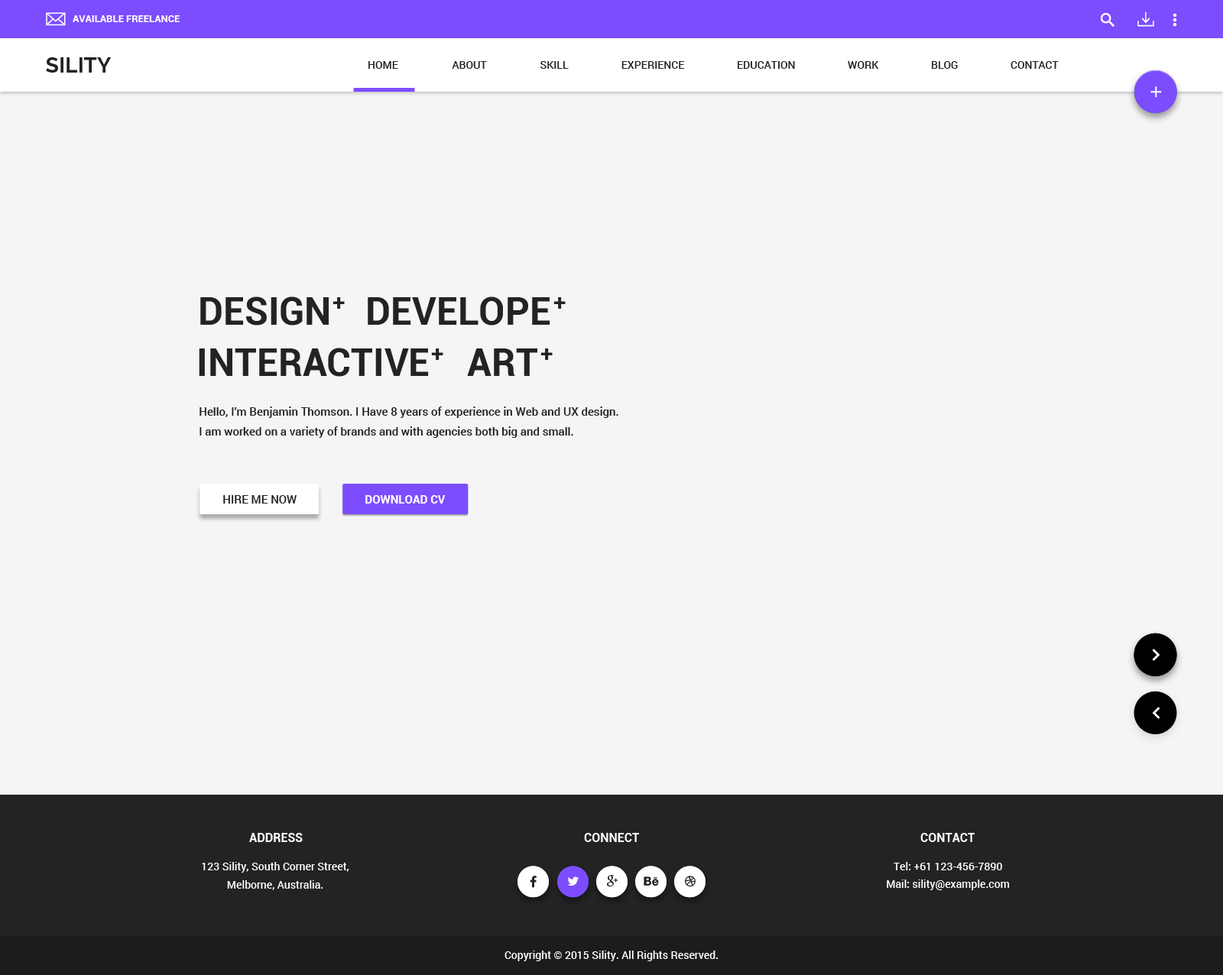
<style>
.page{position:relative;width:1223px;height:975px;background:#f5f5f5}
.page>*{position:absolute;margin:0}
.t1{font:9.9px "Roboto-Bold";color:#ffffff;text-transform:uppercase}
.t2{font:21.4px "Raleway-Bold";color:#232323}
.t3{font:10.7px "Roboto-Medium";color:#232323;text-transform:uppercase}
.t4{font:38.2px "Roboto-Bold";color:#232323;text-transform:uppercase}
.t5{font:22.9px "Roboto-Bold";color:#232323;text-transform:uppercase}
.t6{font:11.5px/19.9px "Roboto-Medium";color:#232323}
.t7{font:11.5px "Roboto-Medium";color:#232323}
.t8{font:11.5px "Roboto-Bold";color:#ffffff}
.t9{font:12.2px "Roboto-Bold";color:#ffffff;text-transform:uppercase}
.t10{font:10.7px/18.3px "Roboto-Medium";color:#ffffff}
.t11{font:10.7px "Roboto-Medium";color:#ffffff}
</style>
<div class="page">
<p class="t1" style="left:73px;top:15px;width:107px;height:7px">available freelance</p>
<p class="t2" style="left:46px;top:57px;width:66px;height:16px">SILITY</p>
<p class="t3" style="left:368px;top:61px;width:30px;height:8px">home</p>
<p class="t3" style="left:452px;top:61px;width:35px;height:8px">about</p>
<p class="t3" style="left:540px;top:61px;width:29px;height:8px">skill</p>
<p class="t3" style="left:621px;top:61px;width:64px;height:8px">experience</p>
<p class="t3" style="left:737px;top:61px;width:58px;height:8px">education</p>
<p class="t3" style="left:848px;top:61px;width:31px;height:8px">work</p>
<p class="t3" style="left:932px;top:61px;width:26px;height:8px">blog</p>
<p class="t3" style="left:1010px;top:61px;width:48px;height:8px">Contact</p>
<p class="t4" style="left:200px;top:297px;width:129px;height:29px">design</p>
<p class="t5" style="left:332px;top:297px;width:13px;height:12px">+</p>
<p class="t4" style="left:368px;top:297px;width:182px;height:29px">developE</p>
<p class="t5" style="left:553px;top:297px;width:13px;height:12px">+</p>
<p class="t4" style="left:199px;top:348px;width:230px;height:29px">interactive</p>
<p class="t5" style="left:431px;top:348px;width:12px;height:12px">+</p>
<p class="t4" style="left:467px;top:348px;width:70px;height:28px">ART</p>
<p class="t5" style="left:540px;top:348px;width:13px;height:12px">+</p>
<p class="t6" style="left:199px;top:407px;width:419px;height:31px">Hello, I’m Benjamin Thomson. I Have 8 years of experience in Web and UX design.<br>I am worked on a variety of brands and with agencies both big and small.</p>
<p class="t7" style="left:223px;top:495px;width:74px;height:9px">HIRE ME NOW</p>
<p class="t8" style="left:365px;top:495px;width:81px;height:9px">DOWNLOAD CV</p>
<p class="t9" style="left:249px;top:833px;width:54px;height:9px">Address</p>
<p class="t9" style="left:584px;top:833px;width:55px;height:9px">connect</p>
<p class="t9" style="left:920px;top:833px;width:54px;height:9px">contact</p>
<p class="t10" style="left:202px;top:862px;width:147px;height:28px;text-align:center">123 Sility, South Corner Street,<br>Melborne, Australia.</p>
<p class="t11" style="left:893px;top:862px;width:109px;height:8px">Tel: +61 123-456-7890</p>
<p class="t11" style="left:887px;top:880px;width:123px;height:10px">Mail: sility@example.com</p>
<p class="t11" style="left:504px;top:951px;width:214px;height:10px">Copyright © 2015 Sility. All Rights Reserved.</p>
</div>
